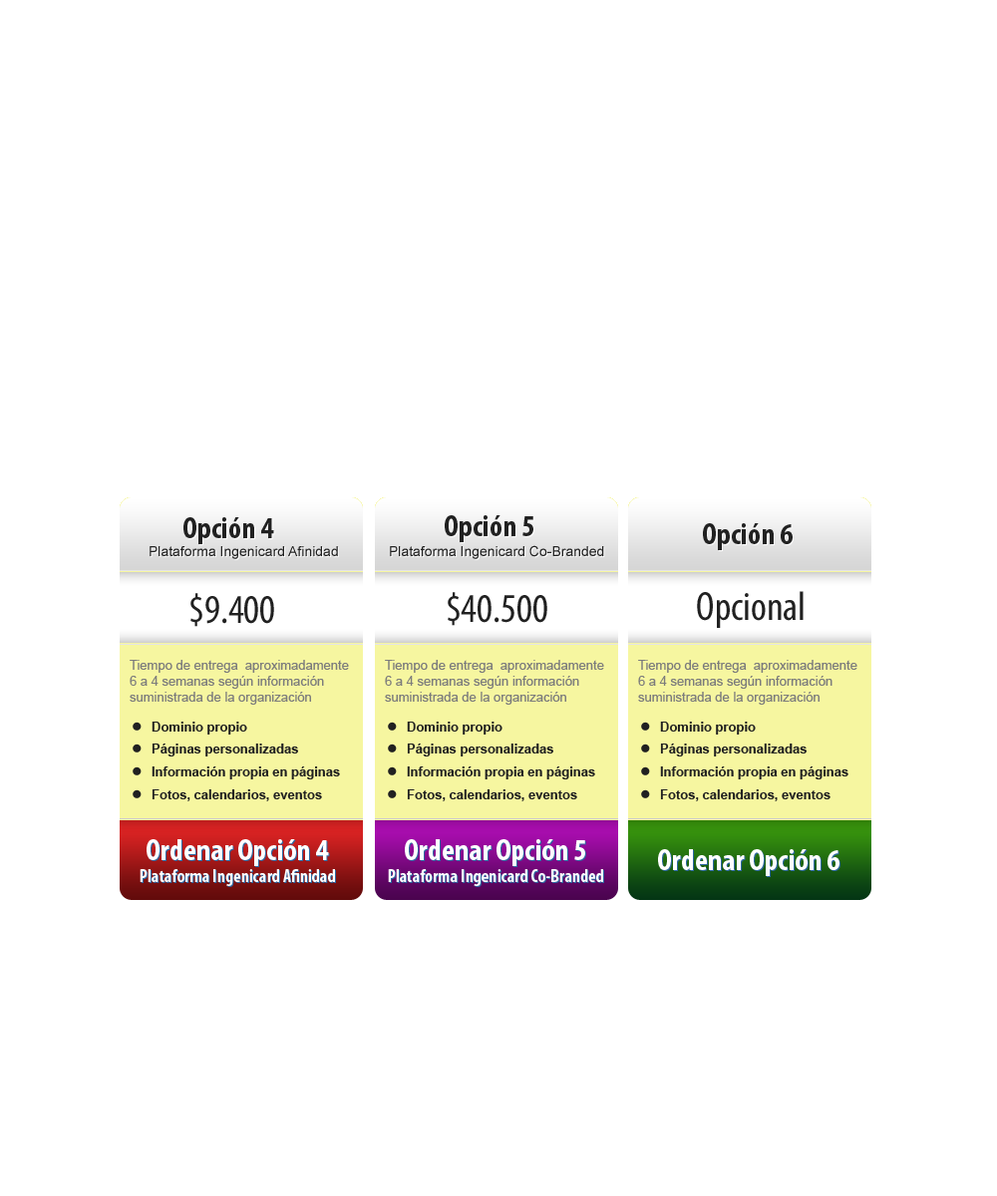
<style>
.page{position:relative;width:997px;height:1196px;background:#ffffff}
.page>*{position:absolute;margin:0}
.t1{font:30.9px "MyriadPro-BoldCond";color:#212121}
.t2{font:14px "ArialMT";color:#212121}
.t3{font:40.9px "MyriadPro-Cond";color:#212121}
.t4{font:13px/15.9px "ArialMT";color:#7c7c7c}
.t5{font:13px "Arial-BoldMT";color:#212121}
.t6{font:17.9px "MyriadPro-BoldCond";color:#ffffff}
.t7{font:30.9px "MyriadPro-BoldCond";color:#ffffff}
</style>
<div class="page">
<p class="t1" style="left:183px;top:517px;width:91px;height:27px">Opción 4</p>
<p class="t1" style="left:445px;top:515px;width:88px;height:27px">Opción 5</p>
<p class="t1" style="left:703px;top:523px;width:89px;height:27px">Opción 6</p>
<p class="t2" style="left:390px;top:545px;width:214px;height:14px">Plataforma Ingenicard Co-Branded</p>
<p class="t2" style="left:150px;top:546px;width:188px;height:13px">Plataforma Ingenicard Afinidad</p>
<p class="t3" style="left:190px;top:593px;width:84px;height:34px">$9.400</p>
<p class="t3" style="left:448px;top:592px;width:99px;height:34px">$40.500</p>
<p class="t3" style="left:697px;top:591px;width:106px;height:37px">Opcional</p>
<p class="t4" style="left:130px;top:660px;width:219px;height:45px">Tiempo de entrega  aproximadamente 6 a 4 semanas según información  suministrada de la organización suministrada.</p>
<p class="t4" style="left:385px;top:660px;width:219px;height:45px">Tiempo de entrega  aproximadamente 6 a 4 semanas según información  suministrada de la organización suministrada.</p>
<p class="t4" style="left:638px;top:660px;width:219px;height:45px">Tiempo de entrega  aproximadamente 6 a 4 semanas según información  suministrada de la organización suministrada.</p>
<p class="t5" style="left:152px;top:722px;width:95px;height:13px">Dominio propio</p>
<p class="t5" style="left:407px;top:722px;width:95px;height:13px">Dominio propio</p>
<p class="t5" style="left:660px;top:722px;width:96px;height:13px">Dominio propio</p>
<p class="t5" style="left:152px;top:744px;width:146px;height:13px">Páginas personalizadas</p>
<p class="t5" style="left:407px;top:744px;width:146px;height:13px">Páginas personalizadas</p>
<p class="t5" style="left:660px;top:744px;width:146px;height:13px">Páginas personalizadas</p>
<p class="t5" style="left:152px;top:767px;width:188px;height:13px">Información propia en páginas</p>
<p class="t5" style="left:407px;top:767px;width:188px;height:13px">Información propia en páginas</p>
<p class="t5" style="left:660px;top:767px;width:188px;height:13px">Información propia en páginas</p>
<p class="t5" style="left:152px;top:789px;width:170px;height:12px">Fotos, calendarios, eventos</p>
<p class="t5" style="left:407px;top:789px;width:170px;height:12px">Fotos, calendarios, eventos</p>
<p class="t5" style="left:660px;top:789px;width:170px;height:12px">Fotos, calendarios, eventos</p>
<p class="t6" style="left:140px;top:839px;width:195px;height:47px;text-align:center"><span class="t7">Ordenar Opción 4<br></span>Plataforma Ingenicard Afinidad</p>
<p class="t6" style="left:388px;top:839px;width:215px;height:47px;text-align:center"><span class="t7">Ordenar Opción 5<br></span>Plataforma Ingenicard Co-Branded</p>
<p class="t7" style="left:658px;top:849px;width:181px;height:27px">Ordenar Opción 6</p>
</div>
